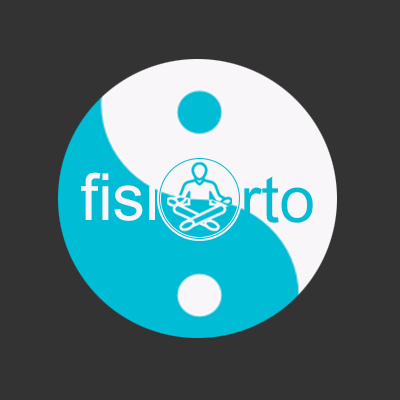
<style>
.page{position:relative;width:400px;height:400px;background:#333333}
.page>*{position:absolute;margin:0}
.t1{font:64.7px "ArialMT";color:#f8f6f8}
.t2{font:64.7px "ArialMT";color:#00bcd4}
</style>
<div class="page">
<p class="t1" style="left:81px;top:172px;width:74px;height:49px">fisi</p>
<p class="t2" style="left:244px;top:176px;width:69px;height:47px">rto</p>
</div>
